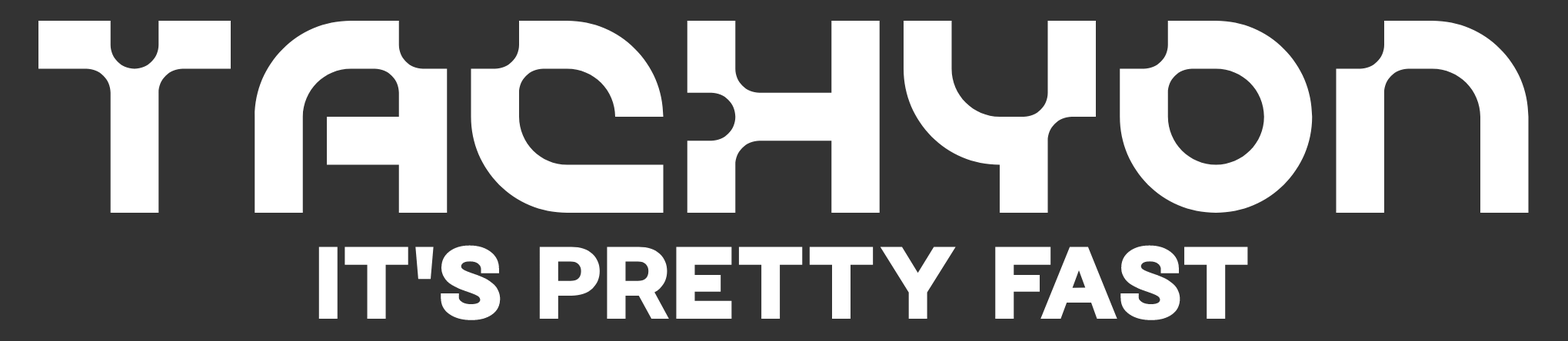
<style>
.page{position:relative;width:1568px;height:341px;background:#333333}
.page>*{position:absolute;margin:0}
.t1{font:384.5px "Gyroscope-Mojang-F";color:#ffffff}
.t2{font:92.3px "Quart-Regular";color:#ffffff}
</style>
<div class="page">
<p class="t1" style="left:38px;top:21px;width:1491px;height:192px">TACHYON</p>
<p class="t2" style="left:318px;top:245px;width:930px;height:76px">IT'S PRETTY FAST</p>
</div>
